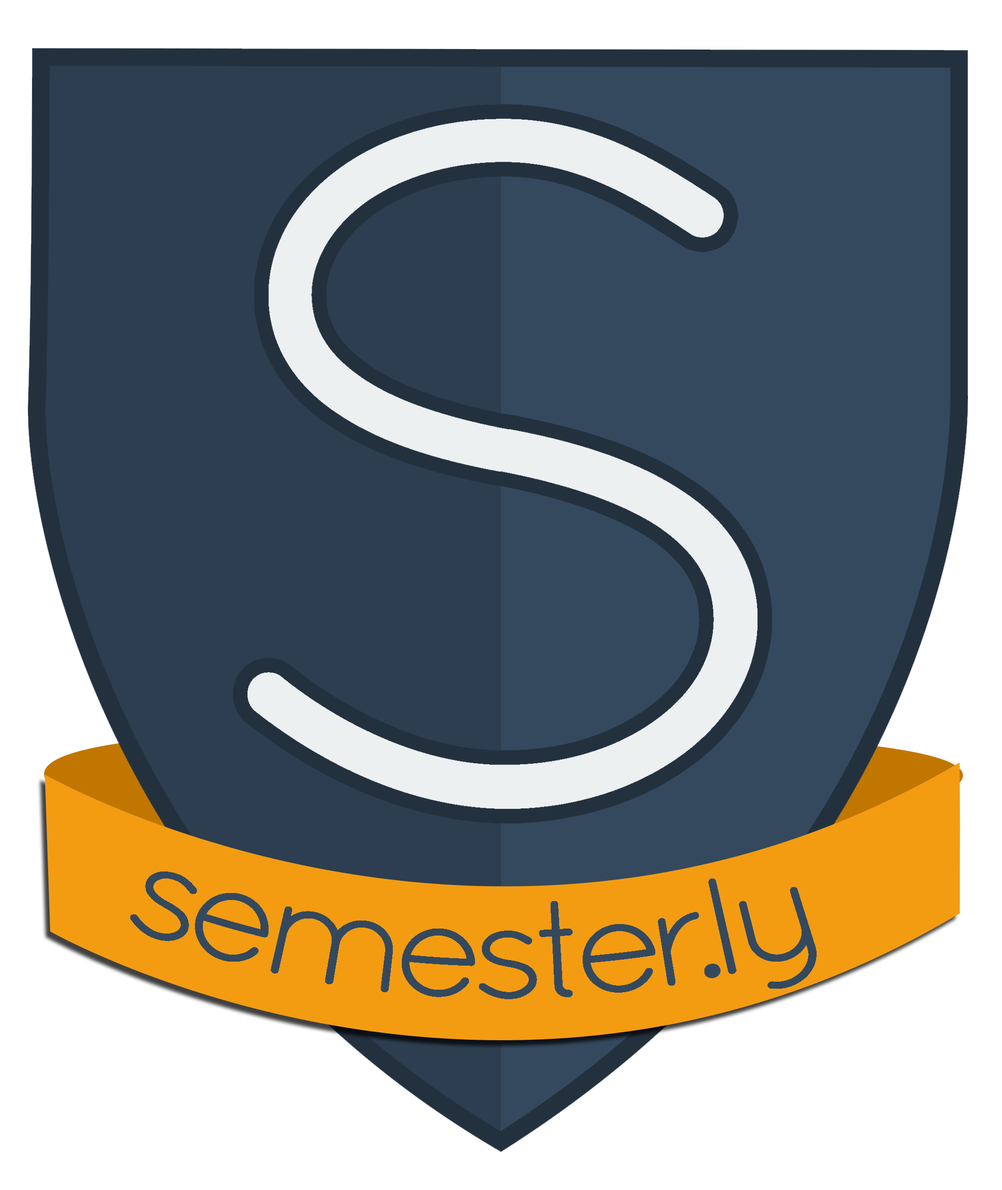
<style>
.page{position:relative;width:1002px;height:1190px;background:#ffffff}
.page>*{position:absolute;margin:0}
.t1{font:138.9px "Quicksand-Regular";letter-spacing:-0.1em;color:#34495e}
</style>
<div class="page">
<p class="t1" style="left:130px;top:872px;width:687px;height:127px;rotate:2deg">semester.ly</p>
</div>
